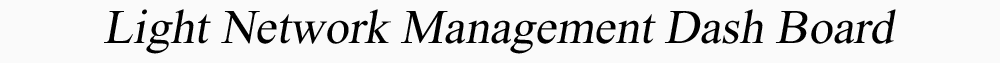
<style>
.page{position:relative;width:1000px;height:63px;background:#fafafa}
.page>*{position:absolute;margin:0}
.t1{font:72px "Microsoft-Himalaya";color:#000000;font-style:italic}
</style>
<div class="page">
<p class="t1" style="left:104px;top:9px;width:792px;height:45px">Light Network Management Dash Board</p>
</div>
